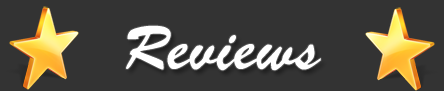
<style>
.page{position:relative;width:444px;height:91px;background:#333333}
.page>*{position:absolute;margin:0}
.t1{font:60px "Signature-Regular";color:#ffffff}
</style>
<div class="page">
<p class="t1" style="left:126px;top:25px;width:195px;height:46px">Reviews</p>
</div>
